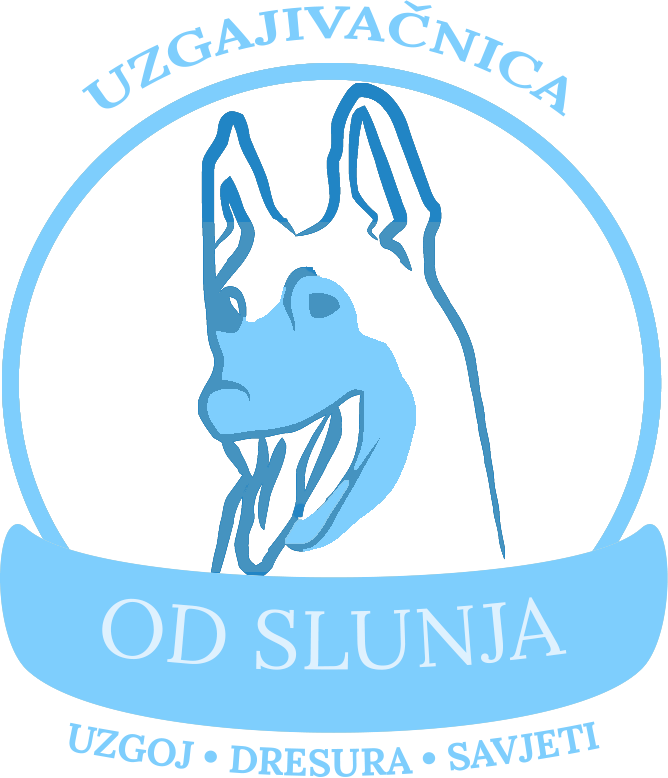
<style>
.page{position:relative;width:668px;height:778px;background:#ffffff}
.page>*{position:absolute;margin:0}
.t1{font:45.8px "Lora-Bold";color:#7ecefd}
.t2{font:83.3px "Lora-Regular";color:#def1fe}
.t3{font:37.5px "Lora-Bold";color:#7ecefd}
</style>
<div class="page">
<p class="t1" style="left:81px;top:0px;width:486px;height:117px;text-align:center">UZGAJIVAČNICA</p>
<p class="t2" style="left:102px;top:597px;width:465px;height:73px">OD SLUNJA</p>
<p class="t3" style="left:69px;top:721px;width:531px;height:57px">UZGOJ • DRESURA • SAVJETI</p>
</div>
